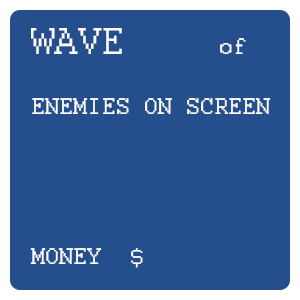
<style>
.page{position:relative;width:300px;height:300px;background:#254f8c}
.page>*{position:absolute;margin:0}
.t1{font:25px "Courier";color:#ffffff}
.t2{font:41.7px "Courier";color:#ffffff}
</style>
<div class="page">
<p class="t1" style="left:30px;top:28px;width:241px;height:240px;text-align:center"><span class="t2">WAVE    </span>of <br><br>ENEMIES ON SCREEN<br><br><br><br><br>MONEY  $</p>
</div>
